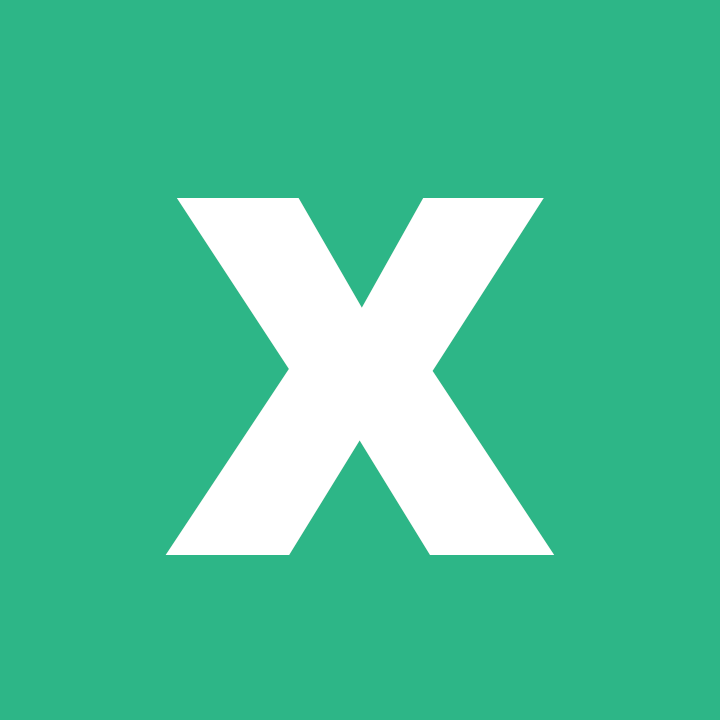
<style>
.page{position:relative;width:720px;height:720px;background:#2db687}
.page>*{position:absolute;margin:0}
.t1{font:499.5px "Arial-Black";color:#ffffff}
</style>
<div class="page">
<p class="t1" style="left:165px;top:198px;width:390px;height:357px">X</p>
</div>
